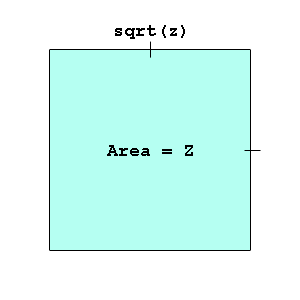
<style>
.page{position:relative;width:300px;height:300px;background:#ffffff}
.page>*{position:absolute;margin:0}
.t1{font:18px "CourierNewPS-BoldMT";color:#000000}
</style>
<div class="page">
<p class="t1" style="left:115px;top:25px;width:70px;height:14px">sqrt(z)</p>
<p class="t1" style="left:107px;top:145px;width:86px;height:11px">Area = Z</p>
</div>
